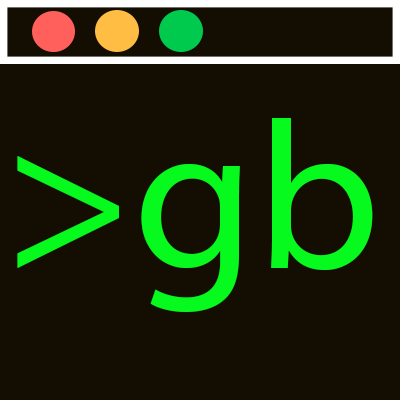
<style>
.page{position:relative;width:400px;height:400px;background:#140d02}
.page>*{position:absolute;margin:0}
.t1{font:210.6px "MyriadPro-Regular";color:#06fa1d;scale:1.04 1}
</style>
<div class="page">
<p class="t1" style="left:17px;top:118px;width:356px;height:194px">&gt;gb</p>
</div>
